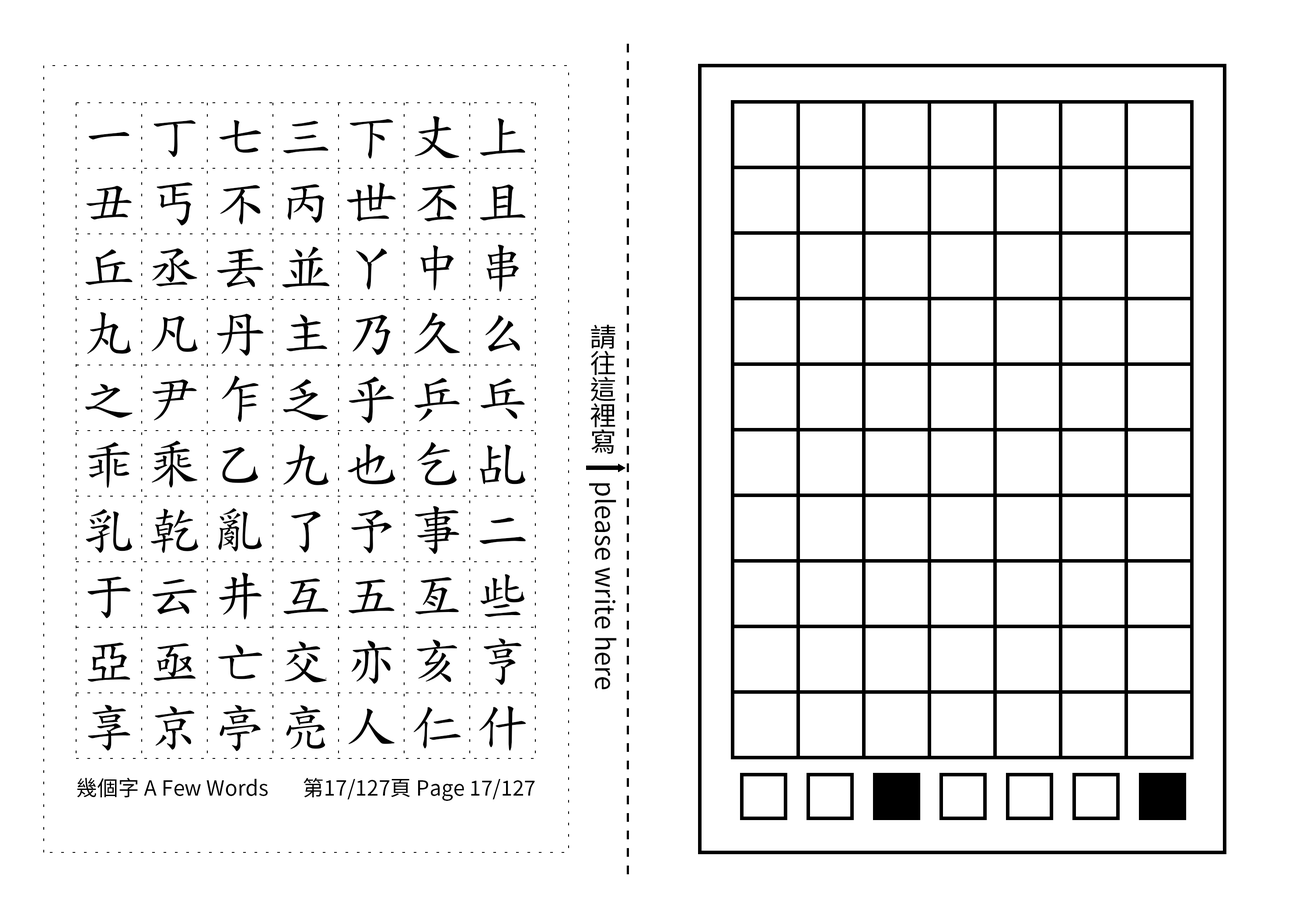
<style>
.page{position:relative;width:1299px;height:918px;background:#ffffff}
.page>*{position:absolute;margin:0}
.t1{font:52.5px/65.6px "TW-Kai-98_1";letter-spacing:0.25em;color:#000000}
.t2{font:26.2px "SourceHanSansTC-Regular";color:#000000}
.t3{font:21px "SourceHanSansTC-Regular";color:#000000}
</style>
<div class="page">
<p class="t1" style="left:85px;top:116px;width:441px;height:636px;text-align:center">一丁七三下丈上丑丐不丙世丕且丘丞丟並丫中串丸凡丹主乃久么之尹乍乏乎乒乓乖乘乙九也乞乩乳乾亂了予事二于云井互五亙些亞亟亡交亦亥亨享京亭亮人仁什</p>
<p class="t2" style="left:589px;top:324px;width:28px;height:366px;text-align:center">請往這裡寫　please write here</p>
<p class="t3" style="left:77px;top:778px;width:191px;height:20px">幾個字 A Few Words</p>
<p class="t3" style="left:303px;top:778px;width:232px;height:23px">第17/127頁 Page 17/127</p>
</div>
